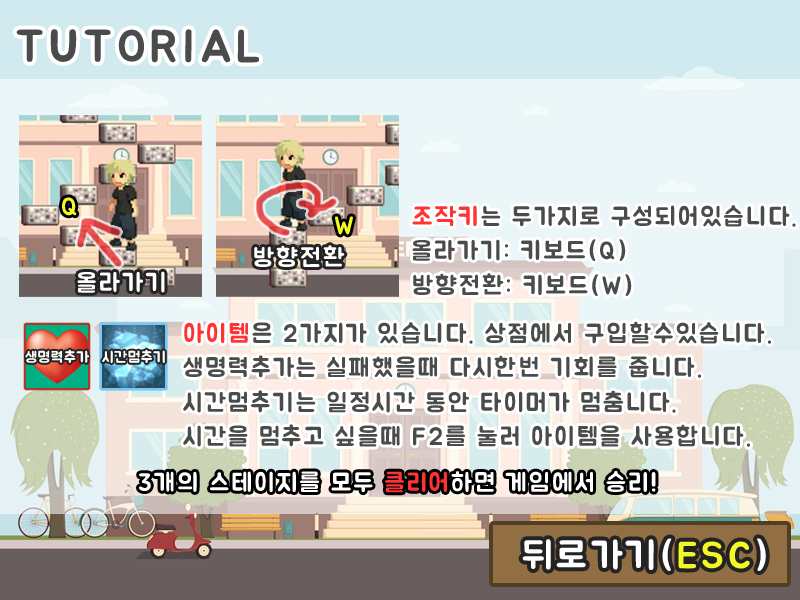
<style>
.page{position:relative;width:800px;height:600px}
.page>*{position:absolute;margin:0}
.t1{font:45.8px "BMJUA";letter-spacing:0.1em;color:#4a4b4b}
.t2{font:25px "BMJUA";letter-spacing:0.1em;color:#f2f927}
.t3{font:25px/34.5px "BMJUA";letter-spacing:0.1em;color:#4a4b4b}
.t4{font:25px/34.5px "BMJUA";letter-spacing:0.1em;color:#ff3333}
.t5{font:25px "BMJUA";letter-spacing:0.1em;color:#ffffff}
.t6{font:25px "BMJUA";letter-spacing:0.1em;color:#ff3333}
.t7{font:37.5px "BMJUA";letter-spacing:0.1em;color:#ffffff}
.t8{font:37.5px "BMJUA";letter-spacing:0.1em;color:#f2f927}
</style>
<div class="page">
<p class="t1" style="left:16px;top:29px;width:243px;height:34px">TUTORIAL</p>
<p class="t2" style="left:62px;top:197px;width:15px;height:19px">Q</p>
<p class="t3" style="left:412px;top:205px;width:384px;height:91px"><span class="t4">조작키</span>는 두가지로 구성되어있습니다.<br>올라가기: 키보드(Q)<br>방향전환: 키보드(W)</p>
<p class="t2" style="left:335px;top:216px;width:18px;height:19px">W</p>
<p class="t5" style="left:254px;top:245px;width:91px;height:22px">방향전환</p>
<p class="t5" style="left:77px;top:271px;width:88px;height:22px">올라가기</p>
<p class="t3" style="left:183px;top:321px;width:588px;height:126px"><span class="t4">아이템</span>은 2가지가 있습니다. 상점에서 구입할수있습니다.<br>생명력추가는 실패했을때 다시한번 기회를 줍니다.<br>시간멈추기는 일정시간 동안 타이머가 멈춤니다.<br>시간을 멈추고 싶을때 F2를 눌러 아이템을 사용합니다.</p>
<p class="t5" style="left:139px;top:471px;width:517px;height:22px">3개의 스테이지를 모두 <span class="t6">클리어</span>하면 게임에서 승리!</p>
<p class="t7" style="left:522px;top:538px;width:244px;height:33px">뒤로가기(<span class="t8">ESC</span>)</p>
</div>
